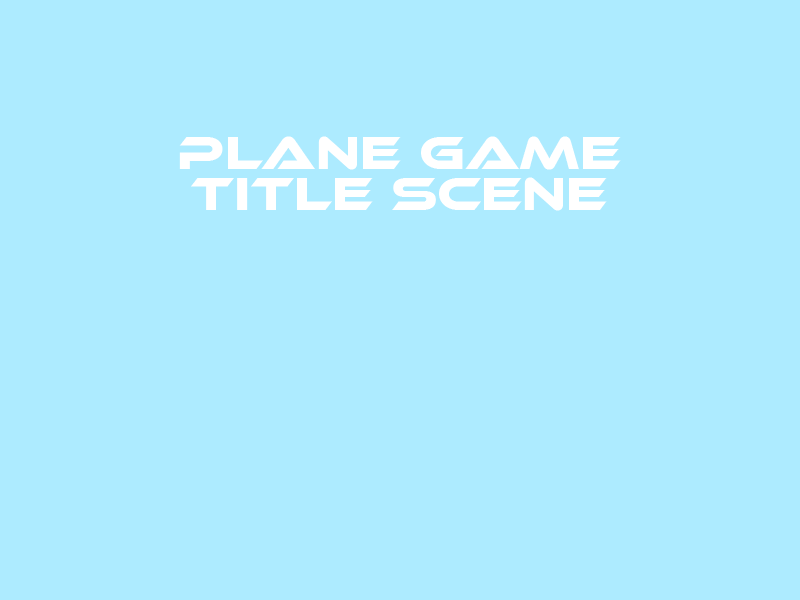
<style>
.page{position:relative;width:800px;height:600px;background:#adebff}
.page>*{position:absolute;margin:0}
.t1{font:47.5px/41px "EthnocentricRg-Regular";color:#ffffff}
</style>
<div class="page">
<p class="t1" style="left:179px;top:136px;width:442px;height:75px;text-align:center">Plane Game<br>Title Scene</p>
</div>
